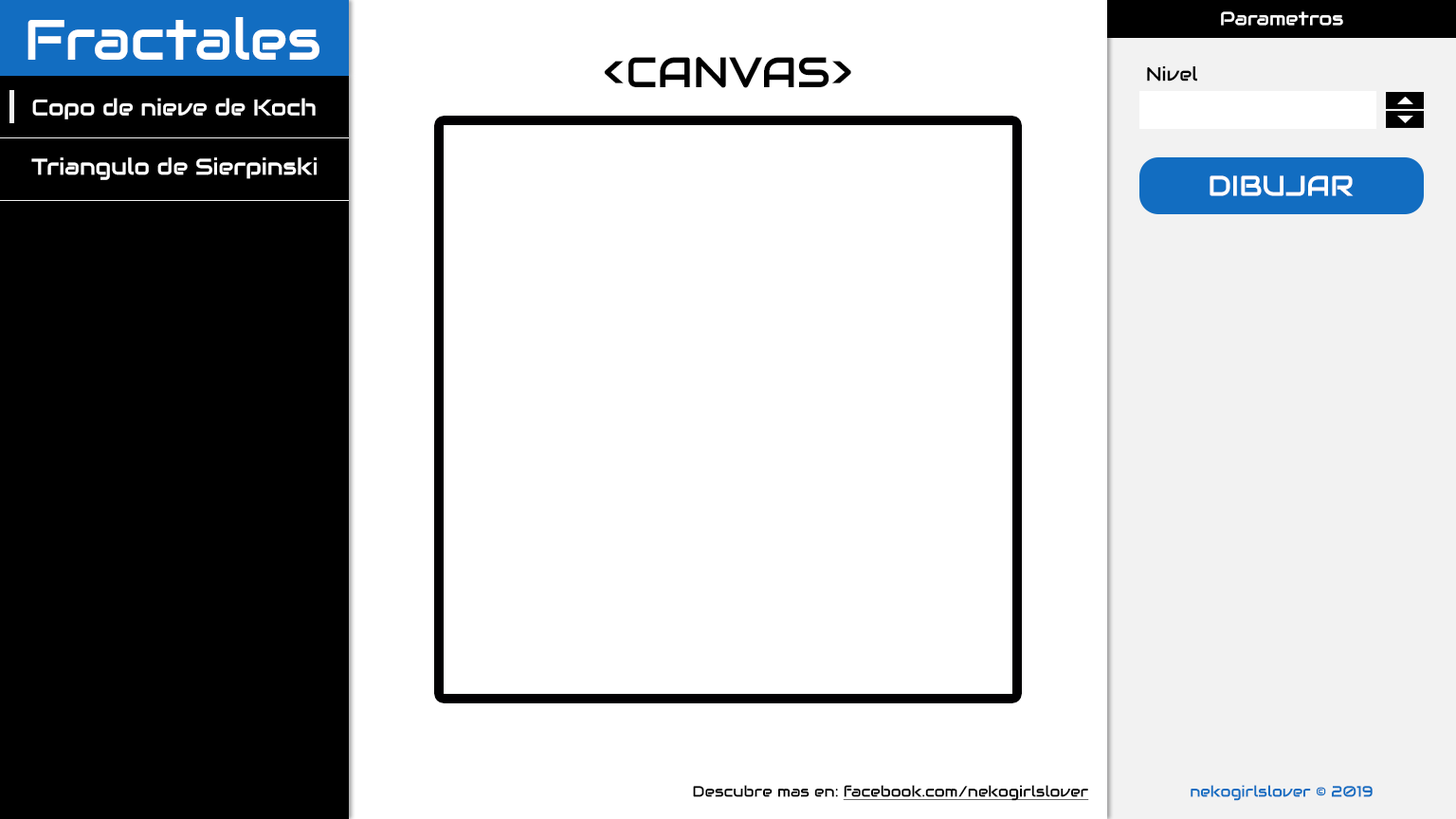
<style>
.page{position:relative;width:1456px;height:819px;background:#ffffff}
.page>*{position:absolute;margin:0}
.t1{font:56.9px "Audiowide-Regular";color:#ffffff}
.t2{font:19px "Audiowide-Regular";color:#ffffff}
.t3{font:42.7px "Audiowide-Regular";color:#000000}
.t4{font:19.1px "Audiowide-Regular";color:#000000}
.t5{font:22.7px "Audiowide-Regular";color:#ffffff}
.t6{font:28.4px "Audiowide-Regular";color:#ffffff}
.t7{font:15.2px "Audiowide-Regular";color:#000000;text-decoration:underline}
.t8{font:15.2px "Audiowide-Regular";color:#000000}
.t9{font:15.2px "Audiowide-Regular";color:#126dc1}
</style>
<div class="page">
<p class="t1" style="left:27px;top:17px;width:292px;height:43px">Fractales</p>
<p class="t2" style="left:1221px;top:11px;width:122px;height:15px">Parametros</p>
<p class="t3" style="left:604px;top:57px;width:247px;height:31px">&lt;CANVAS&gt;</p>
<p class="t4" style="left:1147px;top:66px;width:50px;height:16px">Nivel</p>
<p class="t5" style="left:32px;top:98px;width:284px;height:21px">Copo de nieve de Koch</p>
<p class="t5" style="left:31px;top:157px;width:286px;height:23px">Triangulo de Sierpinski</p>
<p class="t6" style="left:1210px;top:175px;width:144px;height:21px">DIBUJAR</p>
<p class="t7" style="left:693px;top:785px;width:396px;height:16px"><span class="t8">Descubre mas en: </span>facebook.com/nekogirlslover</p>
<p class="t9" style="left:1191px;top:785px;width:182px;height:16px">nekogirlslover © 2019</p>
</div>
